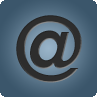
<style>
.page{position:relative;width:97px;height:97px}
.page>*{position:absolute;margin:0}
.t1{font:90px "HelveticaNeueLTStd-Bd";color:#2d2d2d}
</style>
<div class="page">
<p class="t1" style="left:16px;top:15px;width:66px;height:68px">@</p>
</div>
